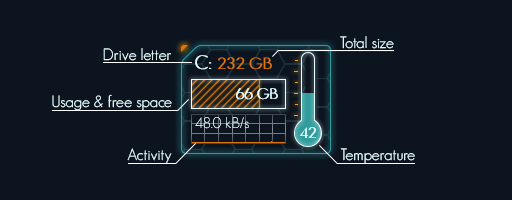
<style>
.page{position:relative;width:512px;height:200px;background:#0c141f}
.page>*{position:absolute;margin:0}
.t1{font:16px "GeosansLight";color:#e6ffff}
</style>
<div class="page">
<p class="t1" style="left:340px;top:36px;width:54px;height:13px">Total size</p>
<p class="t1" style="left:103px;top:48px;width:68px;height:13px">Drive letter</p>
<p class="t1" style="left:52px;top:94px;width:120px;height:17px">Usage &amp; free space</p>
<p class="t1" style="left:127px;top:148px;width:45px;height:16px">Activity</p>
<p class="t1" style="left:340px;top:148px;width:75px;height:16px">Temperature</p>
</div>
